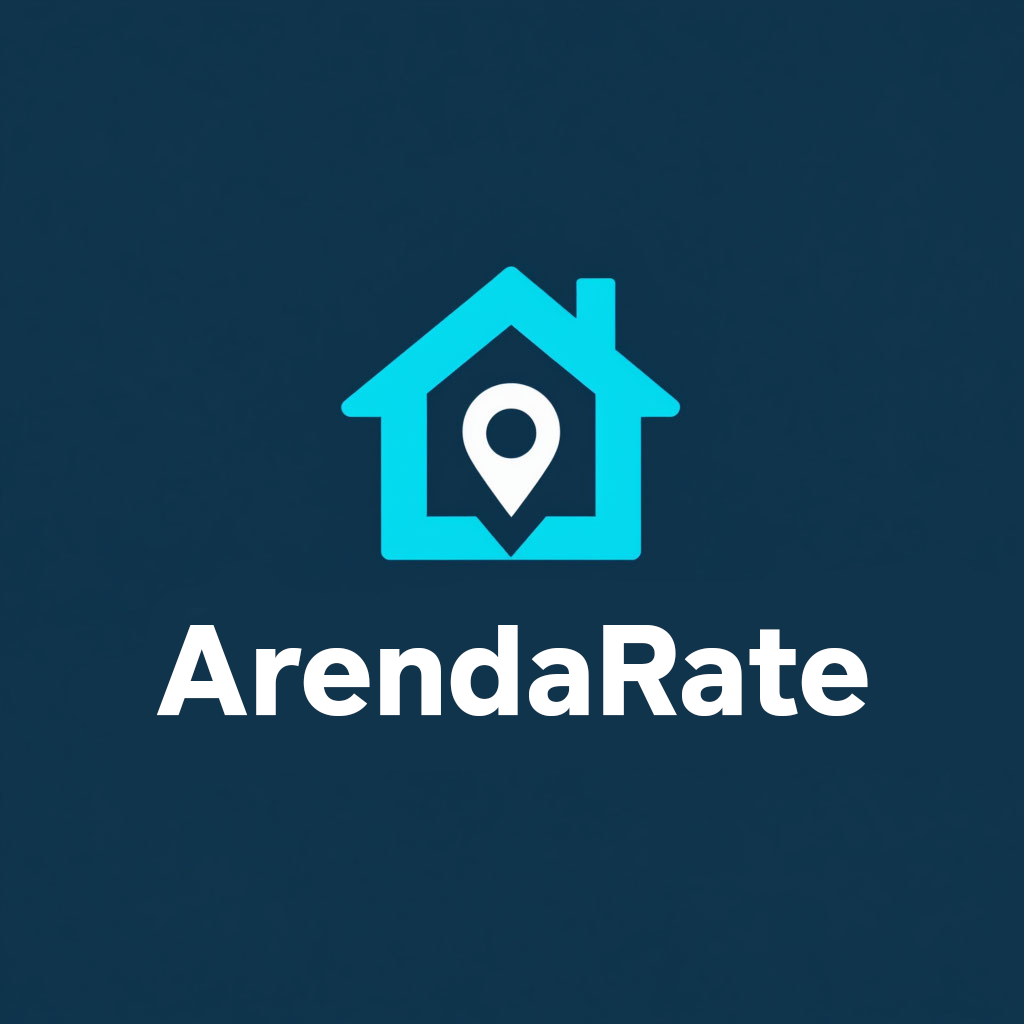
<style>
.page{position:relative;width:1024px;height:1024px;background:#10344c}
.page>*{position:absolute;margin:0}
.t1{font:125px "Infra-Bold";color:#ffffff}
</style>
<div class="page">
<p class="t1" style="left:156px;top:625px;width:712px;height:91px">ArendaRate</p>
</div>
